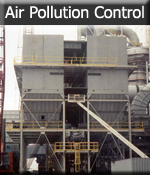
<style>
.page{position:relative;width:150px;height:175px}
.page>*{position:absolute;margin:0}
.t1{font:16px "Tahoma";color:#ffffff}
</style>
<div class="page">
<p class="t1" style="left:5px;top:5px;width:139px;height:14px">Air Pollution Control</p>
</div>
